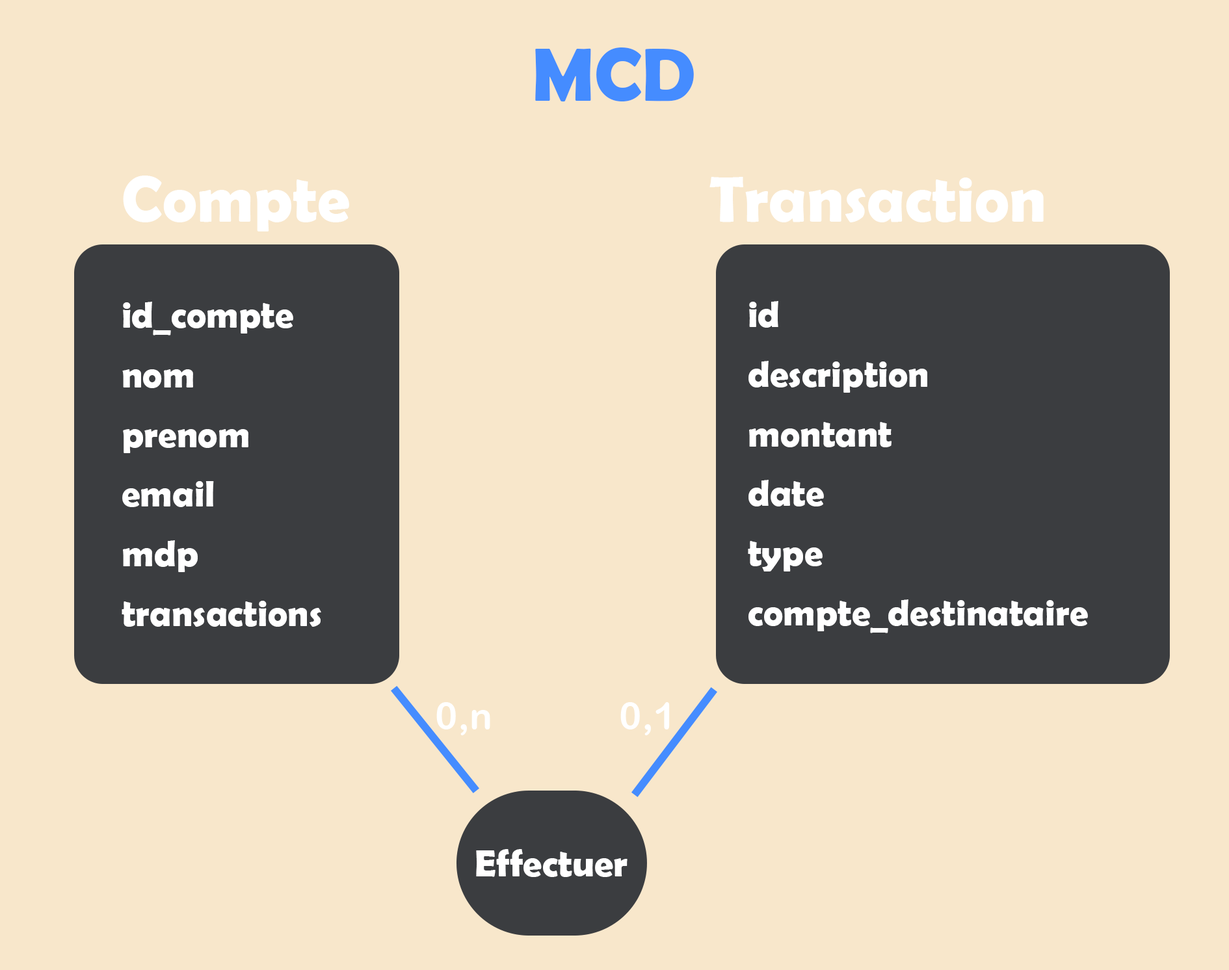
<style>
.page{position:relative;width:1229px;height:970px;background:#f8e7cb}
.page>*{position:absolute;margin:0}
.t1{font:76.2px "BerlinSansFBDemi-Bold";color:#458cff}
.t2{font:65px "BerlinSansFBDemi-Bold";color:#ffffff}
.t3{font:37.3px/59.6px "BerlinSansFBDemi-Bold";color:#ffffff}
.t4{font:37.9px "ArialRoundedMTBold";color:#ffffff}
.t5{font:37.9px "BerlinSansFBDemi-Bold";color:#ffffff}
</style>
<div class="page">
<p class="t1" style="left:535px;top:47px;width:159px;height:55px">MCD</p>
<p class="t2" style="left:123px;top:176px;width:226px;height:56px">Compte</p>
<p class="t2" style="left:709px;top:177px;width:335px;height:45px">Transaction</p>
<p class="t3" style="left:122px;top:302px;width:199px;height:325px">id_compte<br>nom<br>prenom<br>email<br>mdp<br>transactions</p>
<p class="t3" style="left:748px;top:301px;width:340px;height:332px">id<br>description<br>montant<br>date<br>type<br>compte_destinataire</p>
<p class="t4" style="left:436px;top:702px;width:54px;height:33px">0,n</p>
<p class="t4" style="left:620px;top:702px;width:50px;height:33px">0,1</p>
<p class="t5" style="left:476px;top:849px;width:152px;height:28px">Effectuer</p>
</div>
